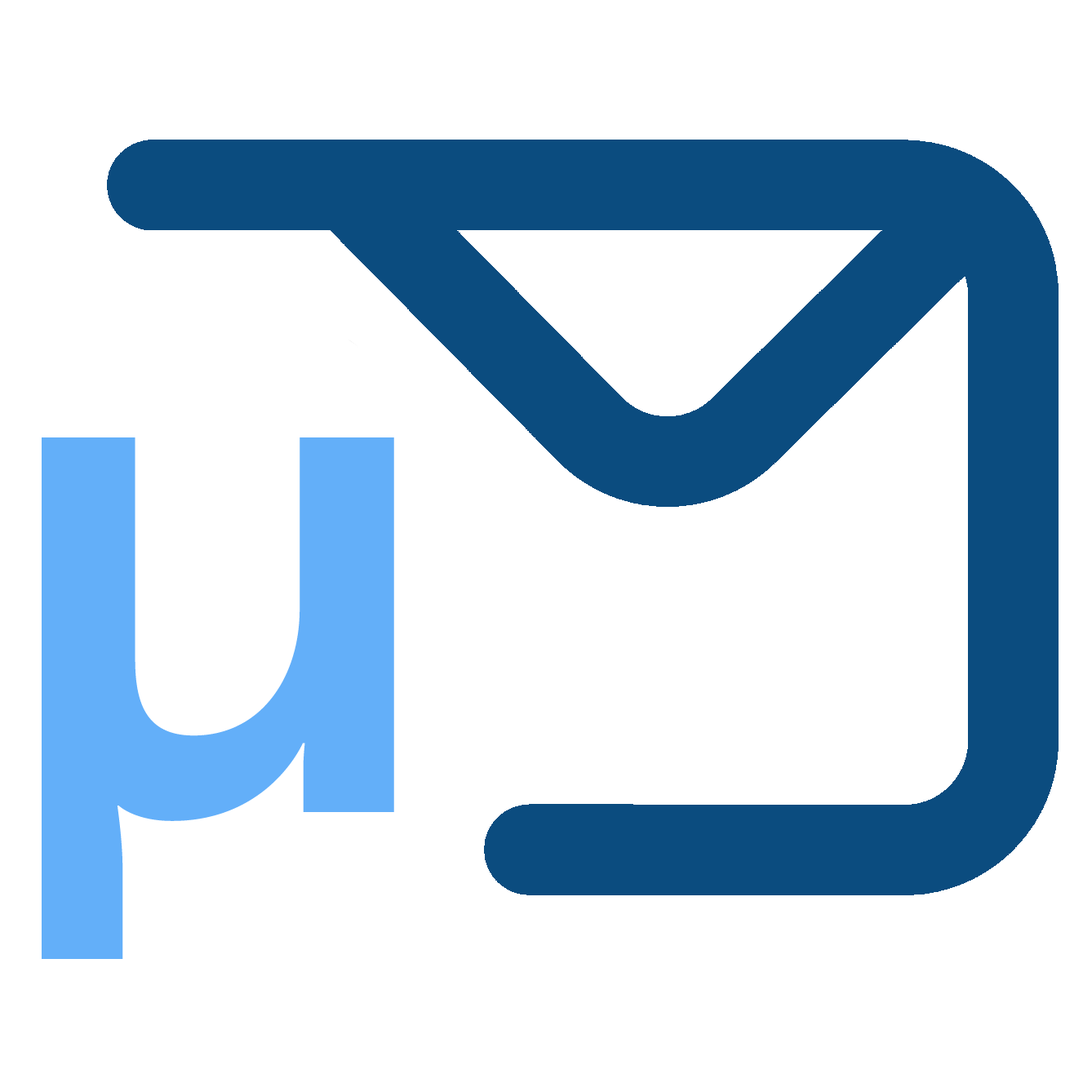
<style>
.page{position:relative;width:1092px;height:1092px;background:#ffffff}
.page>*{position:absolute;margin:0}
.t1{font:734.5px "MuseoSans-700";color:#63aff9}
</style>
<div class="page">
<p class="t1" style="left:42px;top:437px;width:352px;height:522px">μ</p>
</div>
